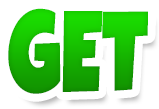
<style>
.page{position:relative;width:159px;height:109px;background:#ffffff}
.page>*{position:absolute;margin:0}
.t1{font:115px "LuckiestGuy-Regular";text-transform:uppercase;scale:0.74 1}
</style>
<div class="page">
<p class="t1" style="left:8px;top:8px;width:140px;height:86px">get</p>
</div>
